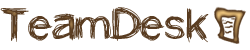
<style>
.page{position:relative;width:250px;height:50px;background:#ffffff}
.page>*{position:absolute;margin:0}
.t1{font:44.5px "Stroke";color:#593c21}
</style>
<div class="page">
<p class="t1" style="left:0px;top:7px;width:209px;height:36px">TeamDesk</p>
</div>
